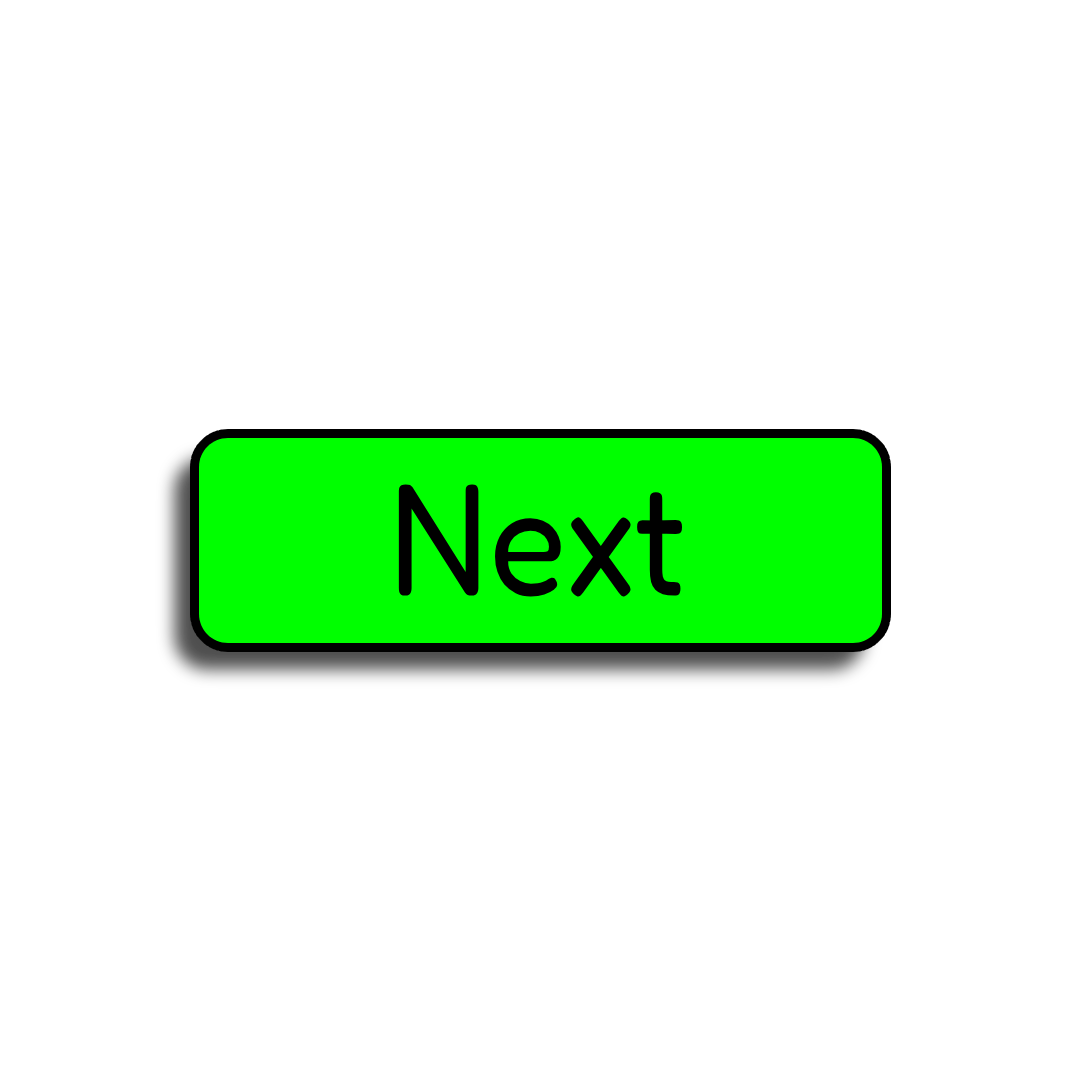
<style>
.page{position:relative;width:1080px;height:1080px;background:#ffffff}
.page>*{position:absolute;margin:0}
.t1{font:159.3px "Fredoka-Regular";color:#000000;scale:0.89 1}
</style>
<div class="page">
<p class="t1" style="left:398px;top:484px;width:285px;height:113px">Next</p>
</div>
